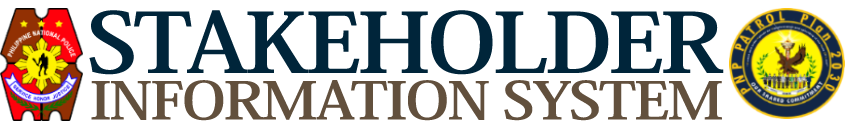
<style>
.page{position:relative;width:845px;height:132px;background:#ffffff}
.page>*{position:absolute;margin:0}
.t1{font:82.2px "KozMinPr6N-Bold";letter-spacing:-0.04em;color:#00253a;scale:1.17 1}
.t2{font:51.3px "KozMinPr6N-Bold";letter-spacing:-0.035em;color:#62503d;scale:1.18 1}
</style>
<div class="page">
<p class="t1" style="left:89px;top:10px;width:635px;height:65px">STAKEHOLDER</p>
<p class="t2" style="left:91px;top:80px;width:631px;height:41px">INFORMATION SYSTEM</p>
</div>
